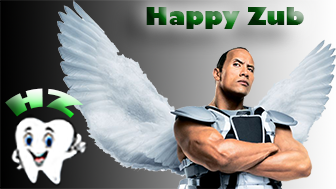
<style>
.page{position:relative;width:336px;height:189px}
.page>*{position:absolute;margin:0}
.t1{font:24px "GillSans-UltraBold";letter-spacing:-0.01em}
</style>
<div class="page">
<p class="t1" style="left:146px;top:7px;width:158px;height:22px">Happy Zub</p>
<p class="t1" style="left:5px;top:88px;width:79px;height:30px">HZ</p>
</div>
